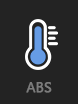
<style>
.page{position:relative;width:78px;height:104px;background:#232323}
.page>*{position:absolute;margin:0}
.t1{font:14px "SegoeUI";color:#7c7c7c;font-weight:bold}
</style>
<div class="page">
<p class="t1" style="left:26px;top:82px;width:26px;height:11px">ABS</p>
</div>
